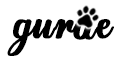
<style>
.page{position:relative;width:120px;height:60px;background:#ffffff}
.page>*{position:absolute;margin:0}
.t1{font:42px "EgregioScript_demo";color:#000000;font-weight:bold}
</style>
<div class="page">
<p class="t1" style="left:7px;top:19px;width:107px;height:37px">gurae</p>
<p class="t1" style="left:73px;top:20px;width:25px;height:20px">a</p>
</div>
